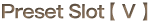
<style>
.page{position:relative;width:150px;height:23px;background:#ffffff}
.page>*{position:absolute;margin:0}
.t1{font:18px "GothicMB101Pro-DeBold";letter-spacing:-0.04em}
.t2{font:18px "GothicMB101Pro-DeBold";letter-spacing:-0.04em;color:#8b6e51}
</style>
<div class="page">
<p class="t1" style="left:2px;top:2px;width:146px;height:19px">Preset Slot【     】</p>
<p class="t2" style="left:122px;top:4px;width:14px;height:15px;opacity:0.9">V</p>
</div>
